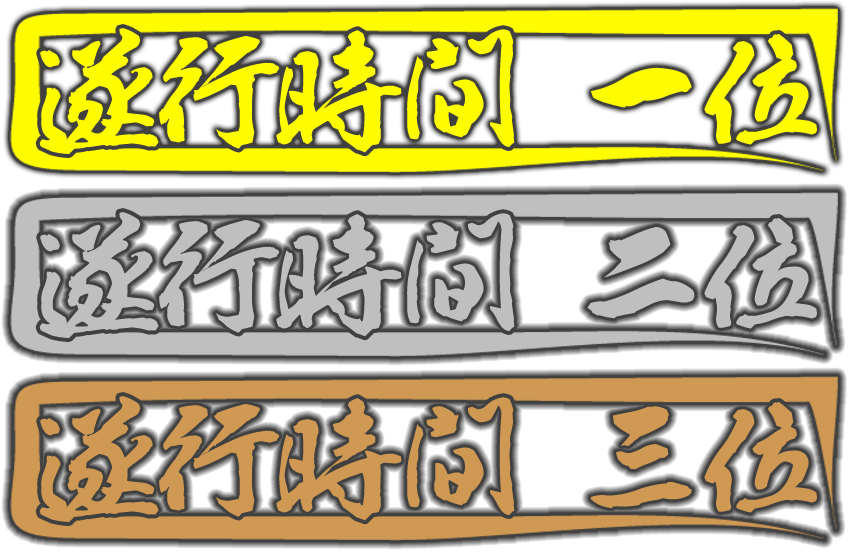
<style>
.page{position:relative;width:854px;height:552px}
.page>*{position:absolute;margin:0}
.t1{font:120px "AB_ootori";color:#fffc00}
.t2{font:120px "AB_ootori";color:#cf9953}
</style>
<div class="page">
<p class="t1" style="left:39px;top:28px;width:778px;height:126px">遂行時間 一位</p>
<p class="t2" style="left:39px;top:396px;width:778px;height:126px">遂行時間 三位</p>
</div>
